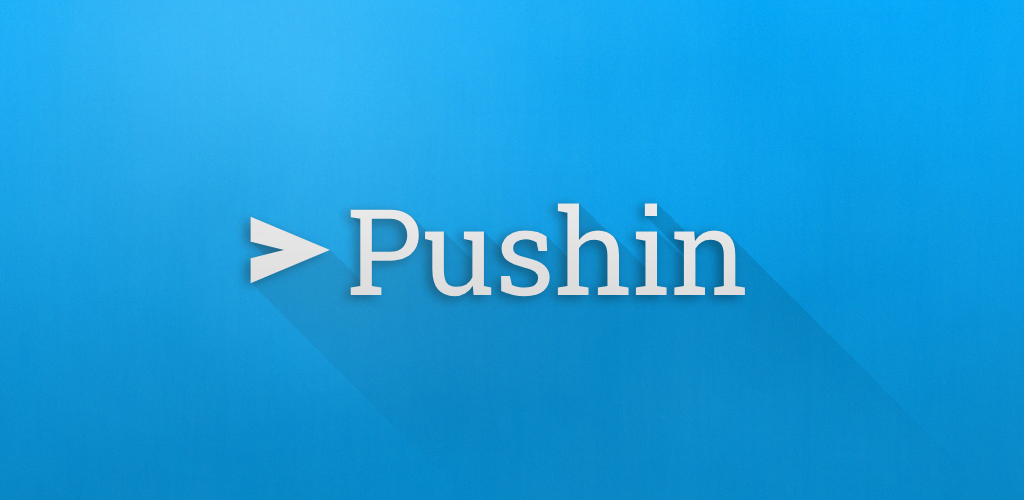
<style>
.page{position:relative;width:1024px;height:500px}
.page>*{position:absolute;margin:0}
.t1{font:120px "RobotoSlab-Regular";color:#e2e2e2}
</style>
<div class="page">
<p class="t1" style="left:350px;top:203px;width:395px;height:94px">Pushin</p>
</div>
